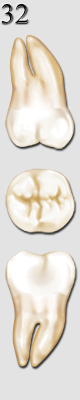
<style>
.page{position:relative;width:80px;height:400px;background:#e4e3e3}
.page>*{position:absolute;margin:0}
.t1{font:28.4px "TimesNewRomanPSMT";letter-spacing:0.005em}
</style>
<div class="page">
<p class="t1" style="left:1px;top:4px;width:27px;height:20px">32</p>
</div>
